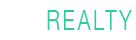
<style>
.page{position:relative;width:136px;height:40px;background:#ffffff}
.page>*{position:absolute;margin:0}
.t1{font:28px "HelveticaNeue-Light";letter-spacing:0.15em;color:#30caa0;scale:0.71 1}
.t2{font:28px "HelveticaNeue-Light";letter-spacing:0.15em;color:#ffffff;scale:0.71 1}
</style>
<div class="page">
<p class="t1" style="left:3px;top:10px;width:129px;height:20px"><span class="t2">LIT </span>REALTY</p>
</div>
